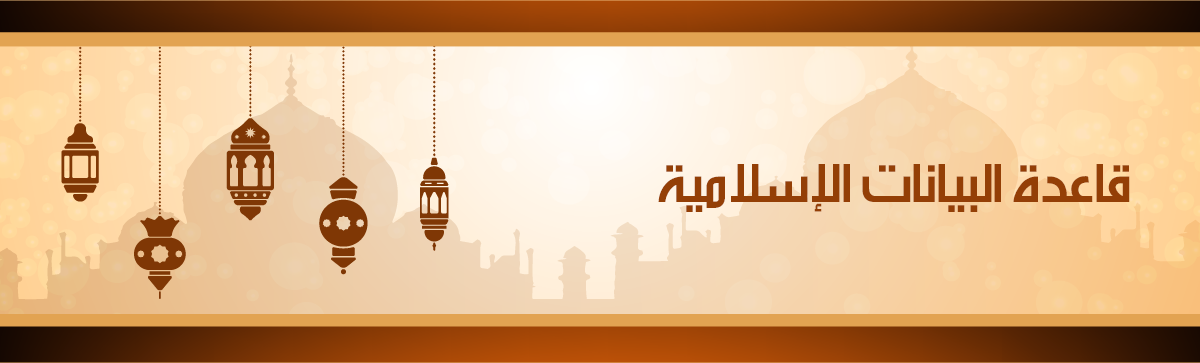
<style>
.page{position:relative;width:1200px;height:363px}
.page>*{position:absolute;margin:0}
.t1{font:65px "AlarabiyaFont-Normal";color:#943f06}
</style>
<div class="page">
<p class="t1" style="left:658px;top:164px;width:472px;height:48px">قاعدة البيانات الإسلامية</p>
</div>
